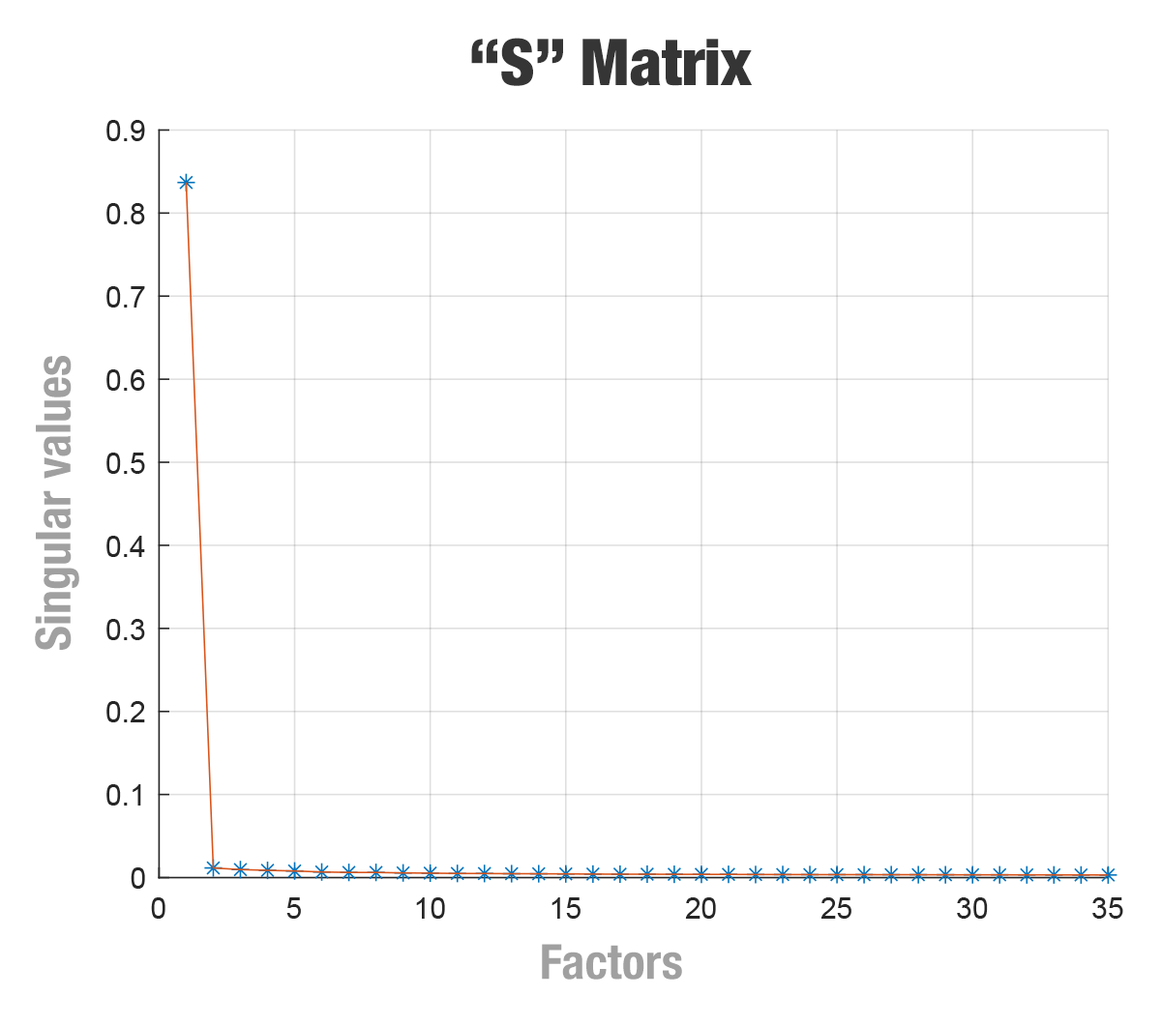
<style>
.page{position:relative;width:1162px;height:1026px;background:#ffffff}
.page>*{position:absolute;margin:0}
.t1{font:64.5px "HelveticaNeue-CondensedBlack";color:#353535}
.t2{font:48.4px "HelveticaNeue-CondensedBold";color:#a0a0a0}
</style>
<div class="page">
<p class="t1" style="left:471px;top:38px;width:282px;height:48px">“S” Matrix</p>
<p class="t2" style="left:35px;top:356px;width:44px;height:294px;rotate:-90deg">Singular values</p>
<p class="t2" style="left:542px;top:944px;width:140px;height:36px">Factors</p>
</div>
